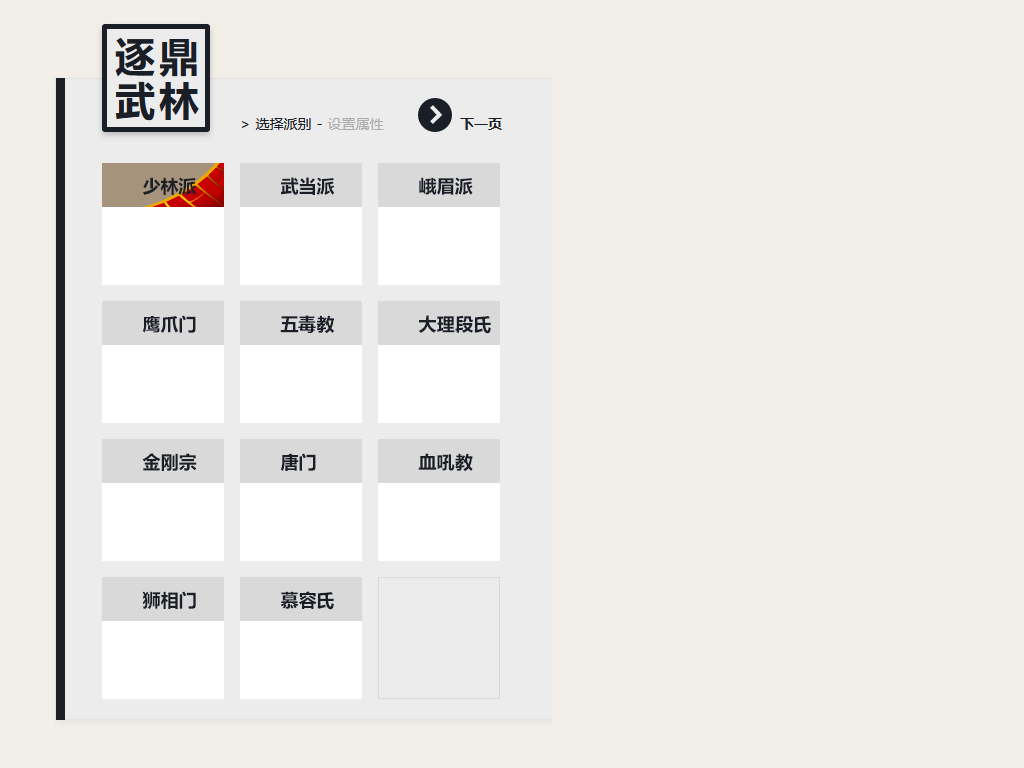
<style>
.page{position:relative;width:1024px;height:768px;background:#f2efe9}
.page>*{position:absolute;margin:0}
.t1{font:18px "MicrosoftYaHei-Bold";color:#1a1e26;text-transform:uppercase}
</style>
<div class="page">
<p class="t1" style="left:143px;top:177px;width:53px;height:18px">少林派</p>
<p class="t1" style="left:281px;top:177px;width:54px;height:18px">武当派</p>
<p class="t1" style="left:419px;top:177px;width:54px;height:18px">峨眉派</p>
<p class="t1" style="left:142px;top:315px;width:54px;height:18px">鹰爪门</p>
<p class="t1" style="left:280px;top:315px;width:55px;height:19px">五毒教</p>
<p class="t1" style="left:418px;top:315px;width:73px;height:19px">大理段氏</p>
<p class="t1" style="left:142px;top:453px;width:55px;height:18px">金刚宗</p>
<p class="t1" style="left:280px;top:453px;width:36px;height:18px">唐门</p>
<p class="t1" style="left:418px;top:453px;width:55px;height:19px">血吼教</p>
<p class="t1" style="left:142px;top:591px;width:54px;height:18px">狮相门</p>
<p class="t1" style="left:280px;top:591px;width:54px;height:19px">慕容氏</p>
</div>
